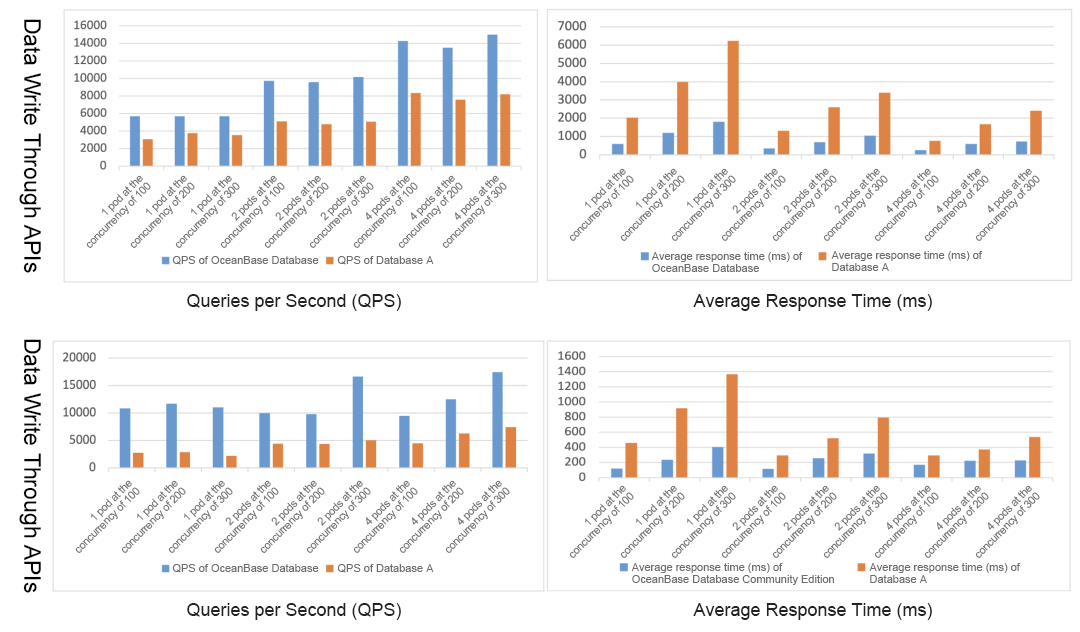
<style>
.page{position:relative;width:1080px;height:632px;background:#ffffff}
.page>*{position:absolute;margin:0}
.t1{font:23px "ArialMT";color:#010101}
.t2{font:11px "ArialMT";letter-spacing:-0.03em;color:#6d6d6d}
.t3{font:11px "ArialMT";color:#6d6d6d}
.t4{font:11px/12px "ArialMT";color:#6d6d6d}
.t5{font:18px "ArialMT";color:#222222}
</style>
<div class="page">
<p class="t1" style="left:19px;top:19px;width:22px;height:254px;rotate:90deg">Data Write Through APIs</p>
<p class="t2" style="left:569px;top:168px;width:65px;height:73px;rotate:-45deg">1 pod at the concurrency of 100</p>
<p class="t2" style="left:620px;top:168px;width:65px;height:73px;rotate:-45deg">1 pod at the concurrency of 200</p>
<p class="t2" style="left:671px;top:168px;width:65px;height:73px;rotate:-45deg">1 pod at the concurrency of 300</p>
<p class="t2" style="left:721px;top:168px;width:65px;height:73px;rotate:-45deg">2 pods at the concurrency of 100</p>
<p class="t2" style="left:772px;top:168px;width:65px;height:73px;rotate:-45deg">2 pods at the concurrency of 200</p>
<p class="t2" style="left:823px;top:168px;width:65px;height:73px;rotate:-45deg">2 pods at the concurrency of 300</p>
<p class="t2" style="left:874px;top:168px;width:65px;height:73px;rotate:-45deg">4 pods at the concurrency of 100</p>
<p class="t2" style="left:924px;top:168px;width:65px;height:73px;rotate:-45deg">4 pods at the concurrency of 200</p>
<p class="t2" style="left:975px;top:168px;width:65px;height:73px;rotate:-45deg">4 pods at the concurrency of 300</p>
<p class="t2" style="left:86px;top:175px;width:65px;height:73px;rotate:-45deg">1 pod at the concurrency of 100</p>
<p class="t2" style="left:130px;top:175px;width:65px;height:73px;rotate:-45deg">1 pod at the concurrency of 200</p>
<p class="t2" style="left:175px;top:175px;width:65px;height:73px;rotate:-45deg">1 pod at the concurrency of 300</p>
<p class="t2" style="left:220px;top:175px;width:65px;height:73px;rotate:-45deg">2 pods at the concurrency of 100</p>
<p class="t2" style="left:264px;top:175px;width:65px;height:73px;rotate:-45deg">2 pods at the concurrency of 200</p>
<p class="t2" style="left:309px;top:175px;width:65px;height:73px;rotate:-45deg">2 pods at the concurrency of 300</p>
<p class="t2" style="left:353px;top:175px;width:65px;height:73px;rotate:-45deg">4 pods at the concurrency of 100</p>
<p class="t2" style="left:398px;top:175px;width:65px;height:73px;rotate:-45deg">4 pods at the concurrency of 200</p>
<p class="t2" style="left:442px;top:175px;width:65px;height:73px;rotate:-45deg">4 pods at the concurrency of 300</p>
<p class="t3" style="left:172px;top:256px;width:147px;height:9px">QPS of OceanBase Database</p>
<p class="t3" style="left:337px;top:256px;width:97px;height:9px">QPS of Database A</p>
<p class="t4" style="left:651px;top:252px;width:152px;height:20px">Average response time (ms) of OceanBase Database</p>
<p class="t4" style="left:831px;top:251px;width:152px;height:20px">Average response time (ms) of Database A</p>
<p class="t5" style="left:187px;top:294px;width:214px;height:17px">Queries per Second (QPS)</p>
<p class="t5" style="left:693px;top:294px;width:239px;height:17px">Average Response Time (ms)</p>
<p class="t1" style="left:19px;top:339px;width:22px;height:254px;rotate:90deg">Data Write Through APIs</p>
<p class="t2" style="left:75px;top:480px;width:65px;height:73px;rotate:-45deg">1 pod at the concurrency of 100</p>
<p class="t2" style="left:121px;top:480px;width:65px;height:73px;rotate:-45deg">1 pod at the concurrency of 200</p>
<p class="t2" style="left:168px;top:480px;width:65px;height:73px;rotate:-45deg">1 pod at the concurrency of 300</p>
<p class="t2" style="left:214px;top:480px;width:65px;height:73px;rotate:-45deg">2 pods at the concurrency of 100</p>
<p class="t2" style="left:260px;top:480px;width:65px;height:73px;rotate:-45deg">2 pods at the concurrency of 200</p>
<p class="t2" style="left:306px;top:480px;width:65px;height:73px;rotate:-45deg">2 pods at the concurrency of 300</p>
<p class="t2" style="left:353px;top:480px;width:65px;height:73px;rotate:-45deg">4 pods at the concurrency of 100</p>
<p class="t2" style="left:399px;top:480px;width:65px;height:73px;rotate:-45deg">4 pods at the concurrency of 200</p>
<p class="t2" style="left:445px;top:480px;width:65px;height:73px;rotate:-45deg">4 pods at the concurrency of 300</p>
<p class="t2" style="left:569px;top:485px;width:65px;height:73px;rotate:-45deg">1 pod at the concurrency of 100</p>
<p class="t2" style="left:620px;top:485px;width:65px;height:73px;rotate:-45deg">1 pod at the concurrency of 200</p>
<p class="t2" style="left:671px;top:485px;width:65px;height:73px;rotate:-45deg">1 pod at the concurrency of 300</p>
<p class="t2" style="left:721px;top:485px;width:65px;height:73px;rotate:-45deg">2 pods at the concurrency of 100</p>
<p class="t2" style="left:772px;top:485px;width:65px;height:73px;rotate:-45deg">2 pods at the concurrency of 200</p>
<p class="t2" style="left:823px;top:485px;width:65px;height:73px;rotate:-45deg">2 pods at the concurrency of 300</p>
<p class="t2" style="left:874px;top:485px;width:65px;height:73px;rotate:-45deg">4 pods at the concurrency of 100</p>
<p class="t2" style="left:924px;top:485px;width:65px;height:73px;rotate:-45deg">4 pods at the concurrency of 200</p>
<p class="t2" style="left:975px;top:485px;width:65px;height:73px;rotate:-45deg">4 pods at the concurrency of 300</p>
<p class="t3" style="left:172px;top:564px;width:147px;height:9px">QPS of OceanBase Database</p>
<p class="t3" style="left:337px;top:564px;width:97px;height:9px">QPS of Database A</p>
<p class="t4" style="left:631px;top:563px;width:203px;height:22px">Average response time (ms) of OceanBase Database Community Edition</p>
<p class="t4" style="left:869px;top:563px;width:152px;height:20px">Average response time (ms) of Database A</p>
<p class="t5" style="left:187px;top:603px;width:214px;height:17px">Queries per Second (QPS)</p>
<p class="t5" style="left:693px;top:603px;width:239px;height:17px">Average Response Time (ms)</p>
</div>
